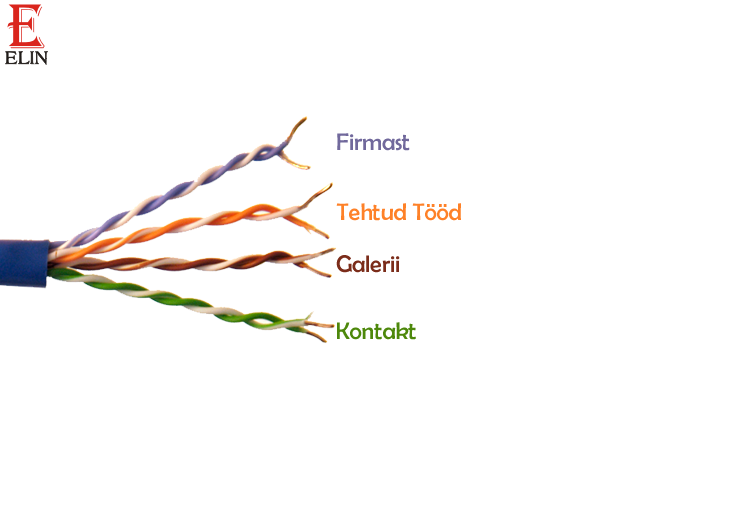
<style>
.page{position:relative;width:755px;height:507px;background:#ffffff}
.page>*{position:absolute;margin:0}
.t1{font:24px "BerlinSansFB-Reg";color:#71699c}
.t2{font:24px "BerlinSansFB-Reg";color:#fe8128}
.t3{font:24px "BerlinSansFB-Reg";color:#7b2c1a}
.t4{font:24px "BerlinSansFB-Reg";color:#4d880b}
</style>
<div class="page">
<p class="t1" style="left:337px;top:133px;width:73px;height:18px">Firmast</p>
<p class="t2" style="left:336px;top:203px;width:125px;height:18px">Tehtud Tööd</p>
<p class="t3" style="left:336px;top:255px;width:64px;height:18px">Galerii</p>
<p class="t4" style="left:337px;top:322px;width:79px;height:18px">Kontakt</p>
</div>
